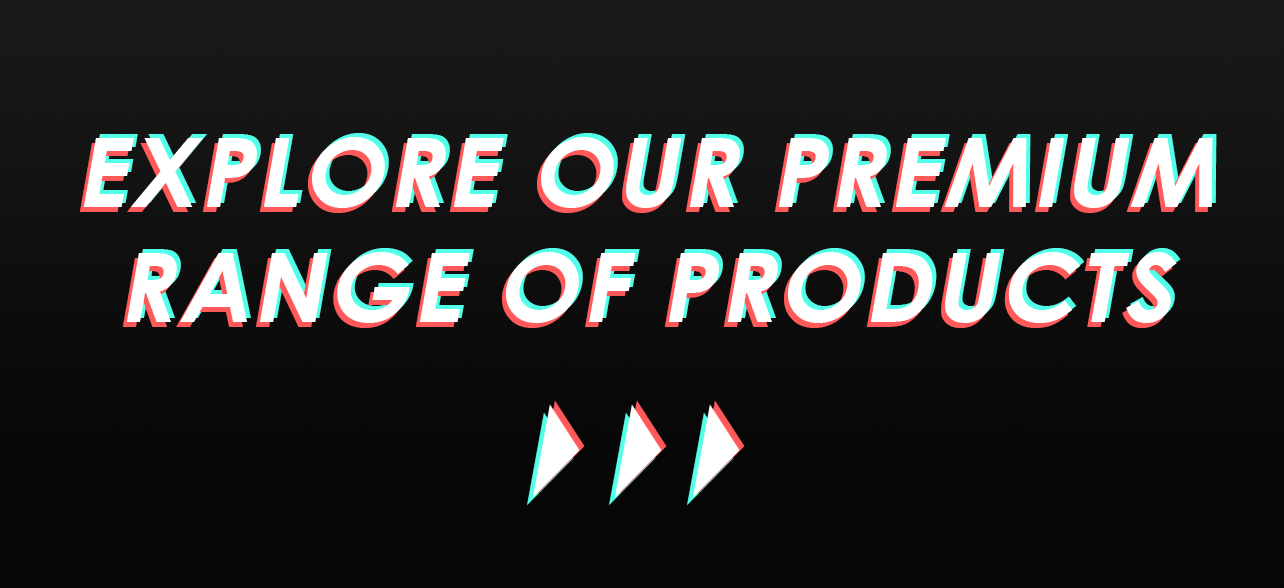
<style>
.page{position:relative;width:1284px;height:588px}
.page>*{position:absolute;margin:0}
.t1{font:96px "CenturyGothic-Bold";letter-spacing:0.04em;color:#ffffff;font-style:italic}
</style>
<div class="page">
<p class="t1" style="left:83px;top:137px;width:1130px;height:186px;text-align:center">EXPLORE OUR PREMIUM<br>RANGE OF PRODUCTS</p>
<p class="t1" style="left:87px;top:133px;width:1130px;height:186px;text-align:center">EXPLORE OUR PREMIUM<br>RANGE OF PRODUCTS</p>
<p class="t1" style="left:79px;top:142px;width:1130px;height:186px;text-align:center">EXPLORE OUR PREMIUM<br>RANGE OF PRODUCTS</p>
</div>
